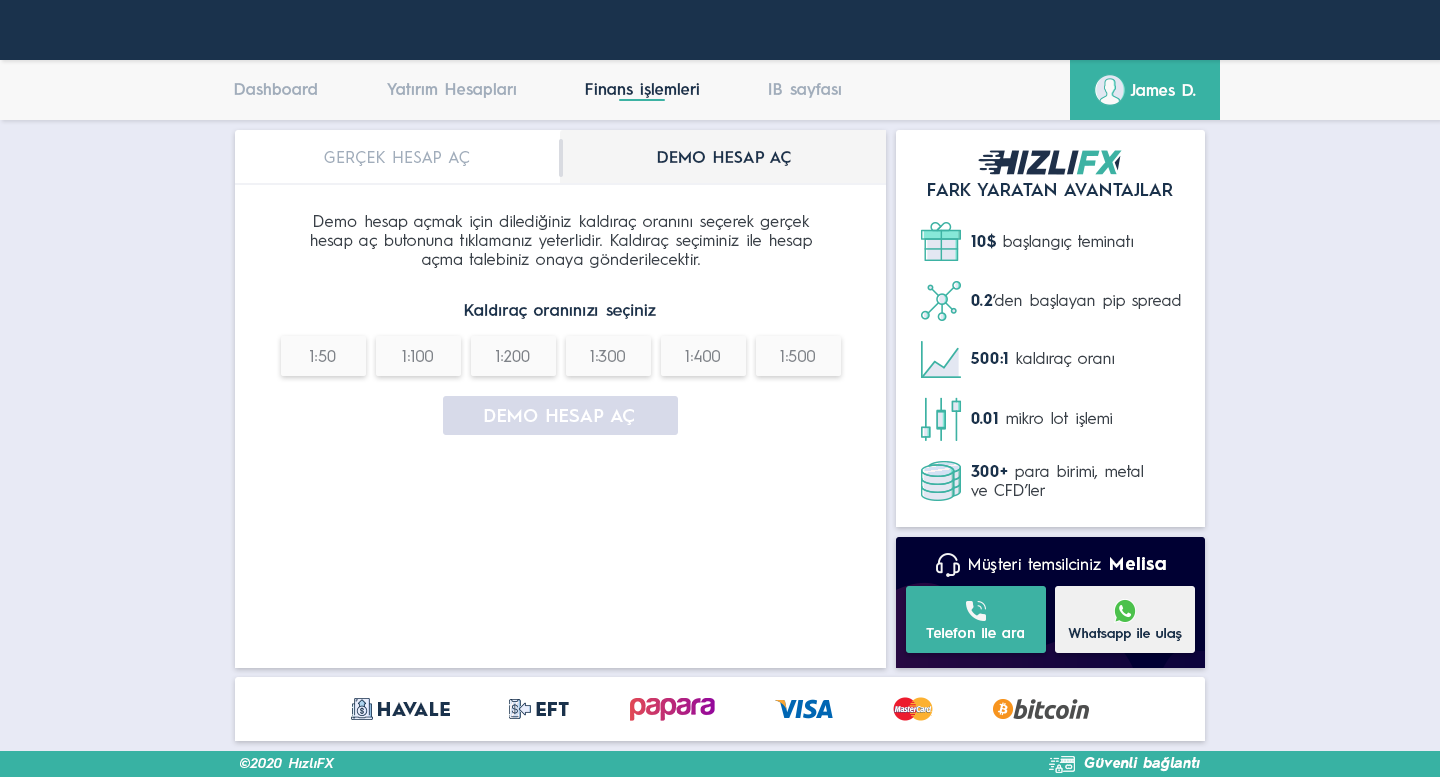
<style>
.page{position:relative;width:1440px;height:777px;background:#ffffff}
.page>*{position:absolute;margin:0}
.t1{font:16px "HurmeGeometricSans3-SemiBold";color:#a1adbb}
.t2{font:16px "HurmeGeometricSans3-SemiBold";color:#1a324c}
.t3{font:16px "HurmeGeometricSans3-SemiBold";color:#fefefe}
.t4{font:16px "HurmeGeometricSans1-Regular";letter-spacing:0.01em;color:#a1adbb}
.t5{font:16px "HurmeGeometricSans1-SemiBold";letter-spacing:0.01em;color:#1a324c}
.t6{font:18px "HurmeGeometricSans1-SemiBold";color:#1a324c}
.t7{font:16px "HurmeGeometricSans1-Regular";letter-spacing:0.01em;color:#3a4149}
.t8{font:16px "HurmeGeometricSans1-Regular";color:#3a4149}
.t9{font:16px "HurmeGeometricSans1-Bold";color:#1a324c}
.t10{font:16px "HurmeGeometricSans3-SemiBold";letter-spacing:0.01em;color:#1a324c}
.t11{font:16px "HurmeGeometricSans1-Regular";letter-spacing:0.01em;color:#7f8389}
.t12{font:18px "HurmeGeometricSans1-SemiBold";letter-spacing:0.025em;color:#ffffff}
.t13{font:16px "HurmeGeometricSans1-Regular";letter-spacing:0.025em;color:#ffffff}
.t14{font:18px "HurmeGeometricSans1-Bold";letter-spacing:0.05em;color:#ffffff}
.t15{font:14px "HurmeGeometricSans3-SemiBold";letter-spacing:0.01em;color:#ffffff}
.t16{font:13.5px "HurmeGeometricSans3-SemiBold";letter-spacing:0.01em;color:#1a324c}
.t17{font:18px "HurmeGeometricSans1-Black";letter-spacing:0.025em;color:#1a324c}
.t18{font:14px "HurmeGeometricSans2-SemiBoldObl";letter-spacing:0.025em;color:#ffffff}
.t19{font:14px "HurmeGeometricSans2-BoldObl";letter-spacing:0.025em;color:#ffffff}
</style>
<div class="page">
<p class="t1" style="left:234px;top:83px;width:83px;height:12px">Dashboard</p>
<p class="t1" style="left:387px;top:83px;width:129px;height:15px">Yatırım Hesapları</p>
<p class="t2" style="left:585px;top:83px;width:114px;height:15px">Finans işlemleri</p>
<p class="t1" style="left:769px;top:83px;width:72px;height:15px">IB sayfası</p>
<p class="t3" style="left:1130px;top:84px;width:66px;height:12px">James D.</p>
<p class="t4" style="left:324px;top:151px;width:146px;height:15px">GERÇEK HESAP AÇ</p>
<p class="t5" style="left:657px;top:151px;width:134px;height:15px">DEMO HESAP AÇ</p>
<p class="t6" style="left:928px;top:183px;width:245px;height:13px">FARK YARATAN AVANTAJLAR</p>
<p class="t7" style="left:311px;top:215px;width:501px;height:53px;text-align:center">Demo hesap açmak için dilediğiniz kaldıraç oranını seçerek gerçek<br>hesap aç butonuna tıklamanız yeterlidir. Kaldıraç seçiminiz ile hesap<br>açma talebiniz onaya gönderilecektir.</p>
<p class="t8" style="left:971px;top:233px;width:162px;height:17px"><span class="t9">10$</span> başlangıç teminatı</p>
<p class="t8" style="left:971px;top:294px;width:210px;height:15px"><span class="t9">0.2</span>‘den başlayan pip spread</p>
<p class="t10" style="left:464px;top:304px;width:192px;height:15px">Kaldıraç oranınızı seçiniz</p>
<p class="t11" style="left:310px;top:350px;width:26px;height:12px">1:50</p>
<p class="t11" style="left:402px;top:350px;width:31px;height:12px">1:100</p>
<p class="t11" style="left:496px;top:350px;width:34px;height:12px">1:200</p>
<p class="t11" style="left:590px;top:350px;width:35px;height:12px">1:300</p>
<p class="t11" style="left:685px;top:350px;width:35px;height:12px">1:400</p>
<p class="t11" style="left:780px;top:350px;width:35px;height:12px">1:500</p>
<p class="t8" style="left:970px;top:352px;width:144px;height:15px"><span class="t9">500:1</span> kaldıraç oranı</p>
<p class="t12" style="left:484px;top:409px;width:150px;height:16px">DEMO HESAP AÇ</p>
<p class="t8" style="left:971px;top:412px;width:141px;height:15px"><span class="t9">0.01</span> mikro lot işlemi</p>
<p class="t8" style="left:971px;top:465px;width:172px;height:32px"><span class="t9">300+</span> para birimi, metal<br>ve CFD’ler</p>
<p class="t13" style="left:969px;top:557px;width:197px;height:16px">Müşteri temsilciniz <span class="t14">Melisa</span></p>
<p class="t15" style="left:926px;top:628px;width:98px;height:10px">Telefon ile ara</p>
<p class="t16" style="left:1068px;top:628px;width:114px;height:13px">Whatsapp ile ulaş</p>
<p class="t17" style="left:378px;top:702px;width:72px;height:14px">HAVALE</p>
<p class="t17" style="left:536px;top:702px;width:33px;height:14px">EFT</p>
<p class="t18" style="left:240px;top:758px;width:95px;height:10px">©2020 HızlıFX</p>
<p class="t19" style="left:1084px;top:757px;width:116px;height:15px">Güvenli bağlantı</p>
</div>
